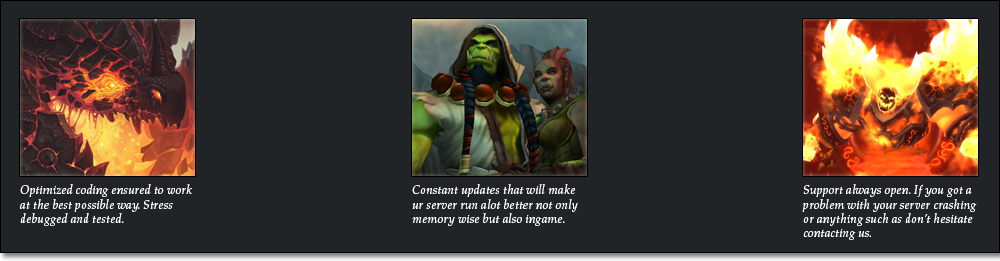
<style>
.page{position:relative;width:1000px;height:261px;background:#212426}
.page>*{position:absolute;margin:0}
.t1{font:12px "Aldus-Italic";color:#ffffff}
</style>
<div class="page">
<p class="t1" style="left:20px;top:184px;width:172px;height:42px">Optimized coding ensured to work at the best possible way. Stress debugged and tested.</p>
<p class="t1" style="left:412px;top:184px;width:166px;height:42px">Constant updates that will make ur server run alot better not only memory wise but also ingame.</p>
<p class="t1" style="left:802px;top:184px;width:175px;height:56px">Support always open. If you got a problem with your server crashing or anything such as don’t hesitate contacting us.</p>
</div>
